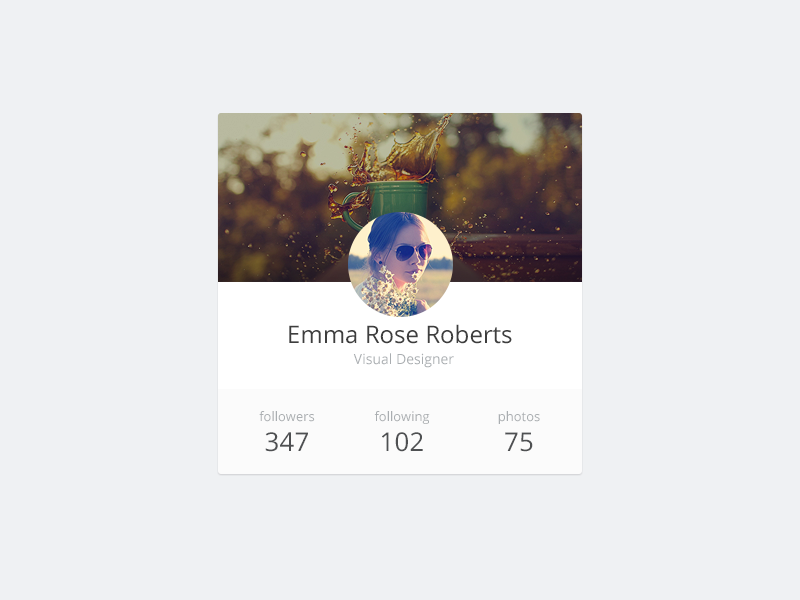
<style>
.page{position:relative;width:800px;height:600px;background:#eff1f3}
.page>*{position:absolute;margin:0}
.t1{font:24px "OpenSans";color:#3e3e3e}
.t2{font:14px "OpenSans";color:#aaaeb1}
.t3{font:13px "OpenSans";color:#aaaeb1}
.t4{font:26px "OpenSans";color:#4e5052}
</style>
<div class="page">
<p class="t1" style="left:289px;top:324px;width:223px;height:20px">Emma Rose Roberts</p>
<p class="t2" style="left:353px;top:353px;width:101px;height:15px">Visual Designer</p>
<p class="t3" style="left:259px;top:411px;width:56px;height:11px">followers</p>
<p class="t3" style="left:374px;top:411px;width:56px;height:13px">following</p>
<p class="t3" style="left:498px;top:411px;width:42px;height:13px">photos</p>
<p class="t4" style="left:265px;top:432px;width:43px;height:20px">347</p>
<p class="t4" style="left:382px;top:432px;width:41px;height:20px">102</p>
<p class="t4" style="left:505px;top:432px;width:28px;height:20px">75</p>
</div>
